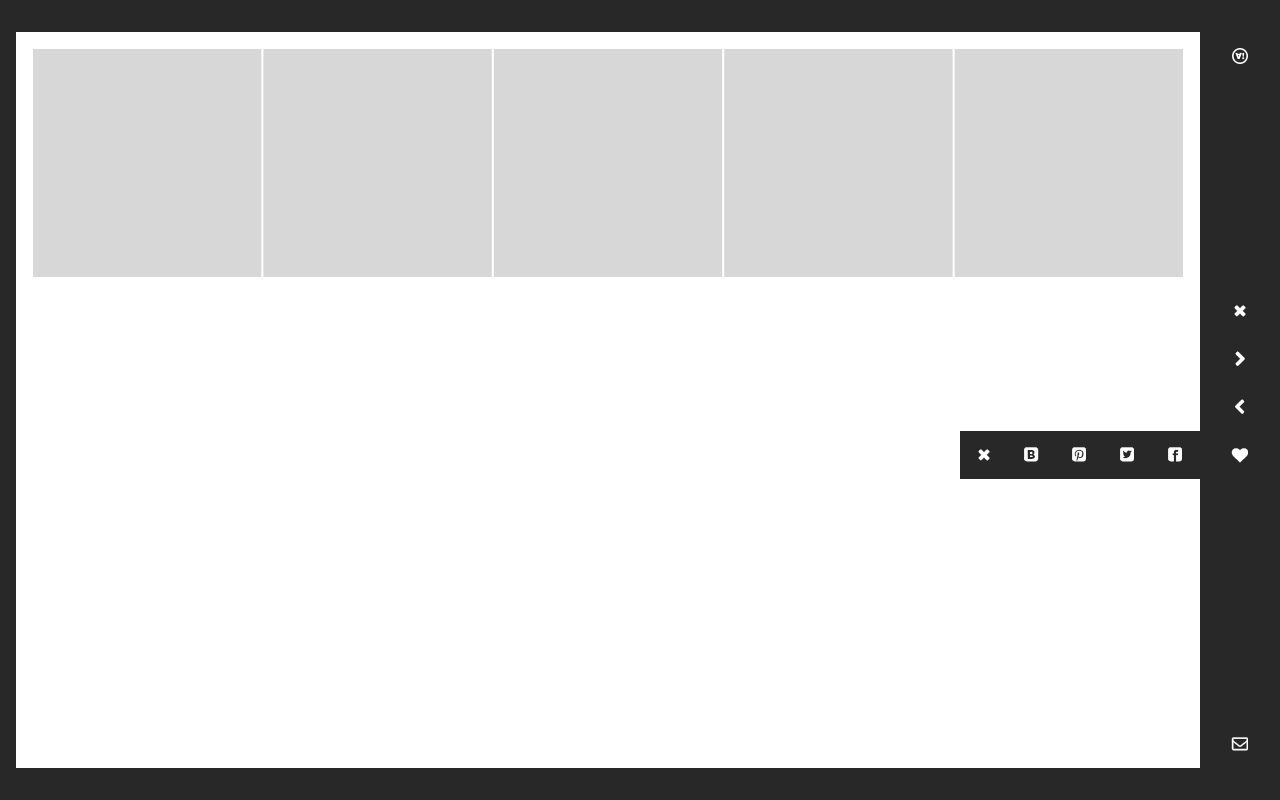
<style>
.page{position:relative;width:1280px;height:800px;background:#ffffff}
.page>*{position:absolute;margin:0}
.t1{font:12px "HelveticaNeueCyr-Heavy";color:#282828}
</style>
<div class="page">
<p class="t1" style="left:1027px;top:450px;width:8px;height:9px">В</p>
</div>
